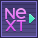
<style>
.page{position:relative;width:38px;height:38px}
.page>*{position:absolute;margin:0}
.t1{font:16px "Metropolis-Medium";color:#ec7ef6}
.t2{font:21px "Metropolis-Medium";color:#ee87f7}
.t3{font:16px "Metropolis-Medium"}
</style>
<div class="page">
<p class="t1" style="left:5px;top:8px;width:10px;height:11px">N</p>
<p class="t2" style="left:15px;top:8px;width:12px;height:11px">e</p>
<p class="t3" style="left:5px;top:20px;width:21px;height:11px">XT</p>
</div>
